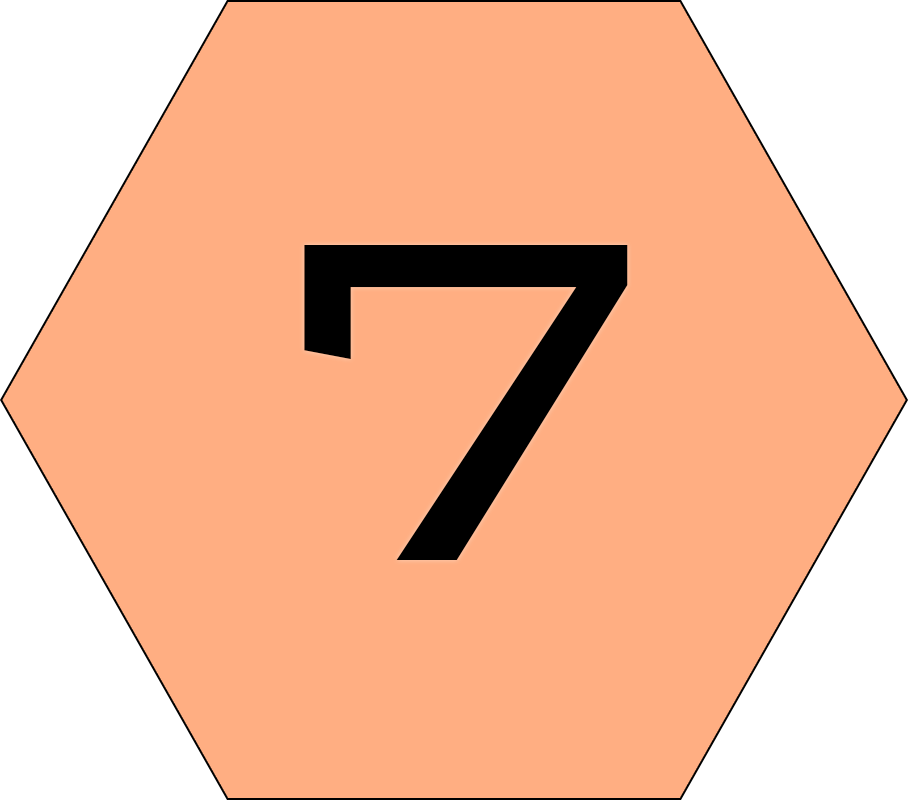
<style>
.page{position:relative;width:908px;height:800px;background:#ffae82}
.page>*{position:absolute;margin:0}
.t1{font:600px "BankGothicBT-Light";color:#000000}
</style>
<div class="page">
<p class="t1" style="left:304px;top:245px;width:324px;height:315px">7</p>
</div>
